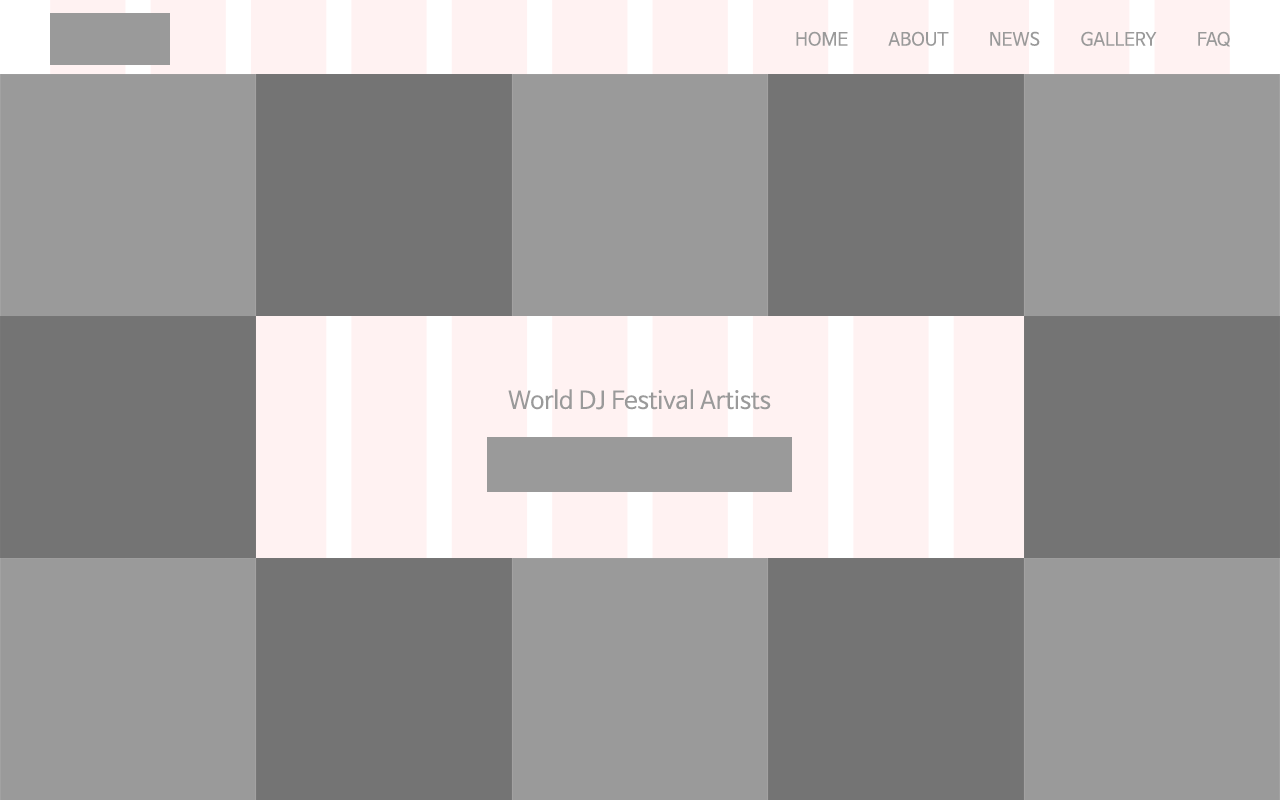
<style>
.page{position:relative;width:1280px;height:800px;background:#9a9a9a}
.page>*{position:absolute;margin:0}
.t1{font:18px "NanumBarunGothic";color:#9a9a9a}
.t2{font:24px "NanumBarunGothic";color:#9a9a9a}
</style>
<div class="page">
<p class="t1" style="left:796px;top:31px;width:434px;height:16px">HOME          ABOUT          NEWS          GALLERY          FAQ</p>
<p class="t2" style="left:508px;top:389px;width:263px;height:21px">World DJ Festival Artists</p>
</div>
